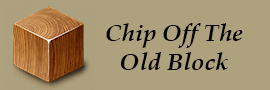
<style>
.page{position:relative;width:270px;height:90px;background:#aea17e}
.page>*{position:absolute;margin:0}
.t1{font:24px "BookAntiqua-BoldItalic";color:#000000}
</style>
<div class="page">
<p class="t1" style="left:106px;top:23px;width:137px;height:47px;text-align:center">Chip Off The<br>Old Block</p>
</div>
